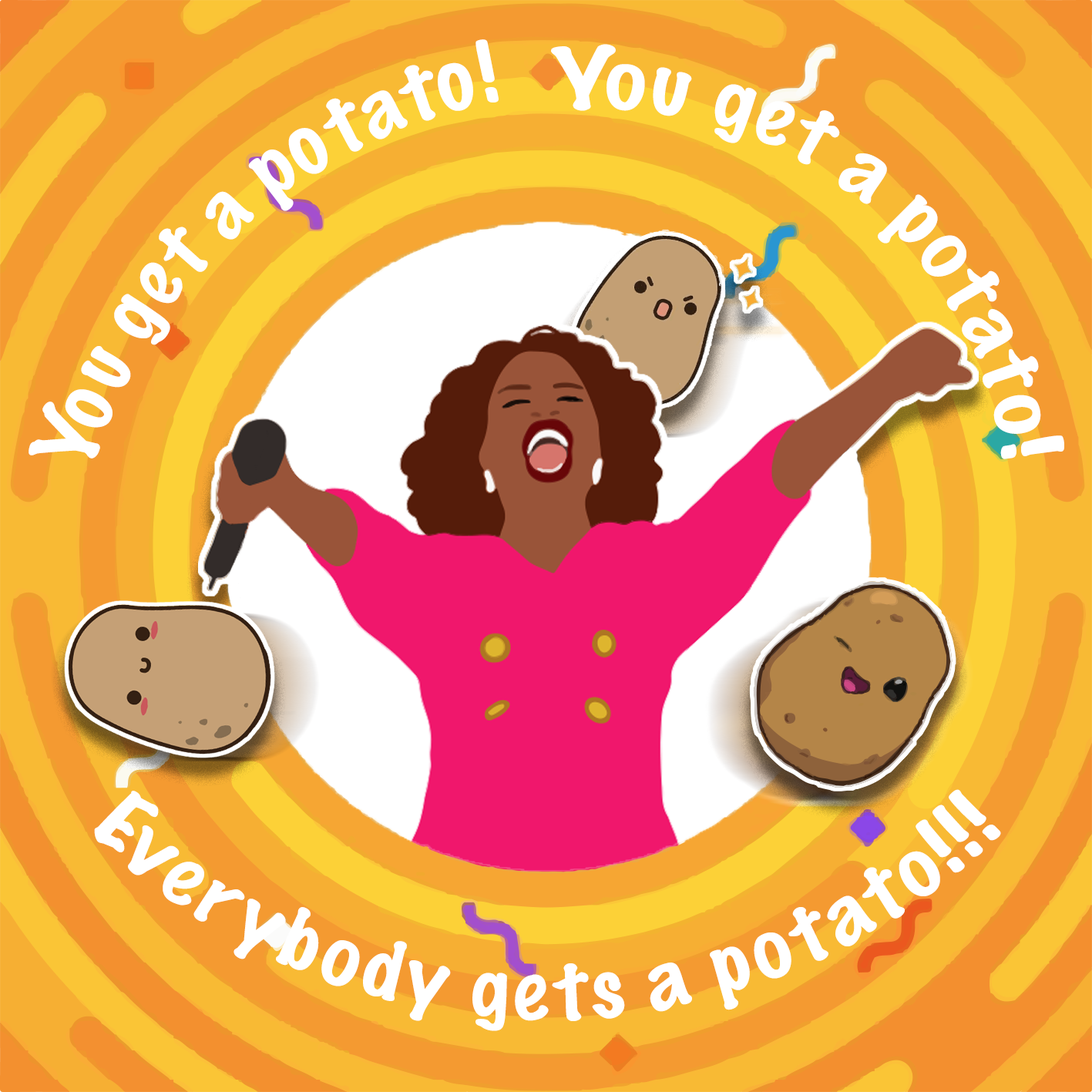
<style>
.page{position:relative;width:1092px;height:1092px}
.page>*{position:absolute;margin:0}
.t1{font:77.1px "MarkerFelt-Thin";letter-spacing:0.005em;color:#ffffff}
.t2{font:77.1px/37px "MarkerFelt-Thin";letter-spacing:0.005em;color:#ffffff}
</style>
<div class="page">
<p class="t1" style="left:29px;top:39px;width:470px;height:420px;rotate:-42deg">You get a potato!</p>
<p class="t1" style="left:551px;top:44px;width:513px;height:415px;rotate:38deg">You get a potato!</p>
<p class="t2" style="left:94px;top:789px;width:907px;height:242px">Everybody gets a potato!!!</p>
</div>
